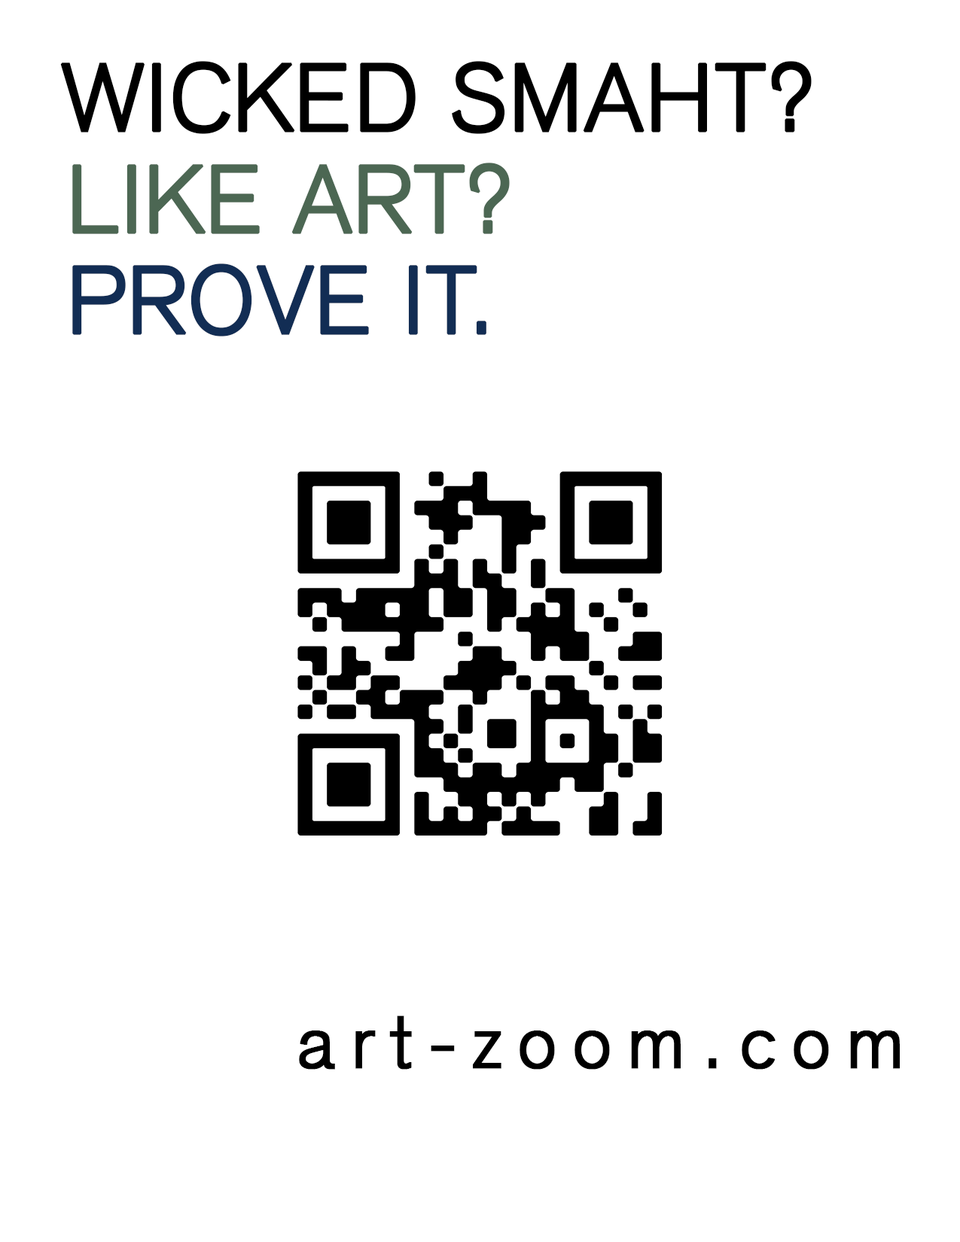
<style>
.page{position:relative;width:960px;height:1242px;background:#ffffff}
.page>*{position:absolute;margin:0}
.t1{font:94.1px "AkzidenzGrotesk-Light";color:#000000;font-weight:bold}
.t2{font:94.1px "AkzidenzGrotesk-Light";color:#4c6753;font-weight:bold}
.t3{font:94.1px "AkzidenzGrotesk-Light";color:#122d54;font-weight:bold}
.t4{font:75.3px "AkzidenzGrotesk-Light";letter-spacing:0.2em;color:#000000;font-weight:bold}
</style>
<div class="page">
<p class="t1" style="left:60px;top:61px;width:752px;height:73px">WICKED SMAHT?</p>
<p class="t2" style="left:72px;top:163px;width:438px;height:71px">LIKE ART?</p>
<p class="t3" style="left:72px;top:264px;width:414px;height:73px">PROVE IT.</p>
<p class="t4" style="left:299px;top:1016px;width:601px;height:54px">art-zoom.com</p>
</div>
